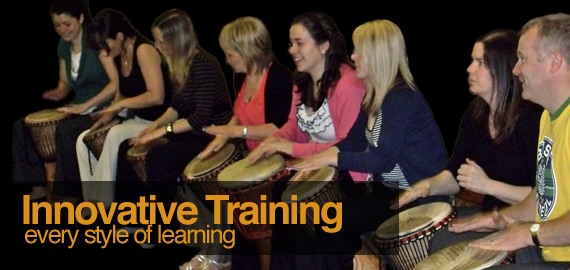
<style>
.page{position:relative;width:570px;height:270px;background:#000000}
.page>*{position:absolute;margin:0}
.t1{font:40.2px "Helvetica-Bold";letter-spacing:-0.06em;color:#dc9119}
.t2{font:25.2px "Helvetica";letter-spacing:-0.06em;color:#dc9119}
</style>
<div class="page">
<p class="t1" style="left:23px;top:195px;width:319px;height:38px">Innovative Training</p>
<p class="t2" style="left:25px;top:224px;width:210px;height:25px">every style of learning</p>
</div>
